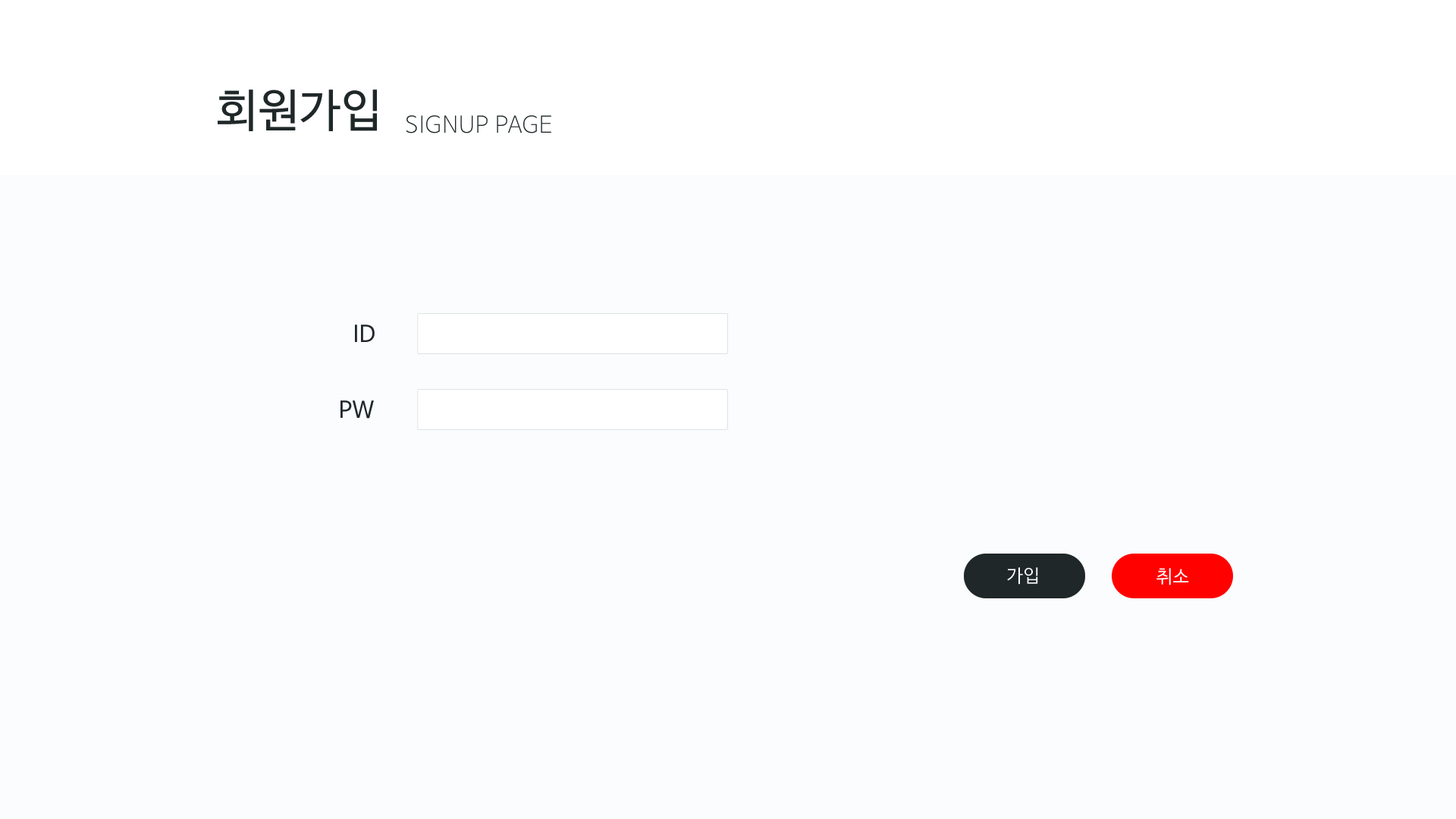
<style>
.page{position:relative;width:1456px;height:819px;background:#fafcfe}
.page>*{position:absolute;margin:0}
.t1{font:45.5px "NanumBarunGothic";letter-spacing:0.025em;color:#202728}
.t2{font:22.7px "NanumBarunGothicUltraLight";letter-spacing:0.025em;color:#202728}
.t3{font:22.7px "NanumBarunGothic";letter-spacing:0.025em;color:#202728}
.t4{font:18.2px "NanumBarunGothic";letter-spacing:0.025em;color:#ffffff}
</style>
<div class="page">
<p class="t1" style="left:218px;top:89px;width:159px;height:42px">회원가입</p>
<p class="t2" style="left:406px;top:115px;width:145px;height:18px">SIGNUP PAGE</p>
<p class="t3" style="left:355px;top:325px;width:20px;height:17px">ID</p>
<p class="t3" style="left:340px;top:400px;width:34px;height:19px">PW</p>
<p class="t4" style="left:1007px;top:567px;width:31px;height:18px">가입</p>
<p class="t4" style="left:1156px;top:568px;width:33px;height:17px">취소</p>
</div>
